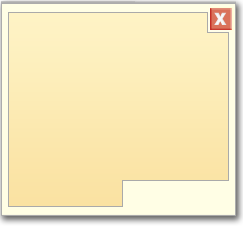
<style>
.page{position:relative;width:243px;height:226px}
.page>*{position:absolute;margin:0}
.t1{font:18px "MyriadPro-BlackSemiExt";color:#fcfafa}
</style>
<div class="page">
<p class="t1" style="left:214px;top:12px;width:13px;height:13px">X</p>
</div>
